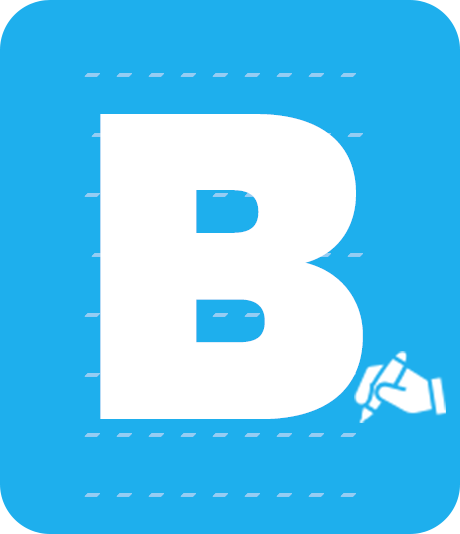
<style>
.page{position:relative;width:460px;height:534px;background:#1eafed}
.page>*{position:absolute;margin:0}
.t1{font:430.5px "Poppins-Black";color:#ffffff}
</style>
<div class="page">
<p class="t1" style="left:100px;top:114px;width:263px;height:305px">B</p>
</div>
